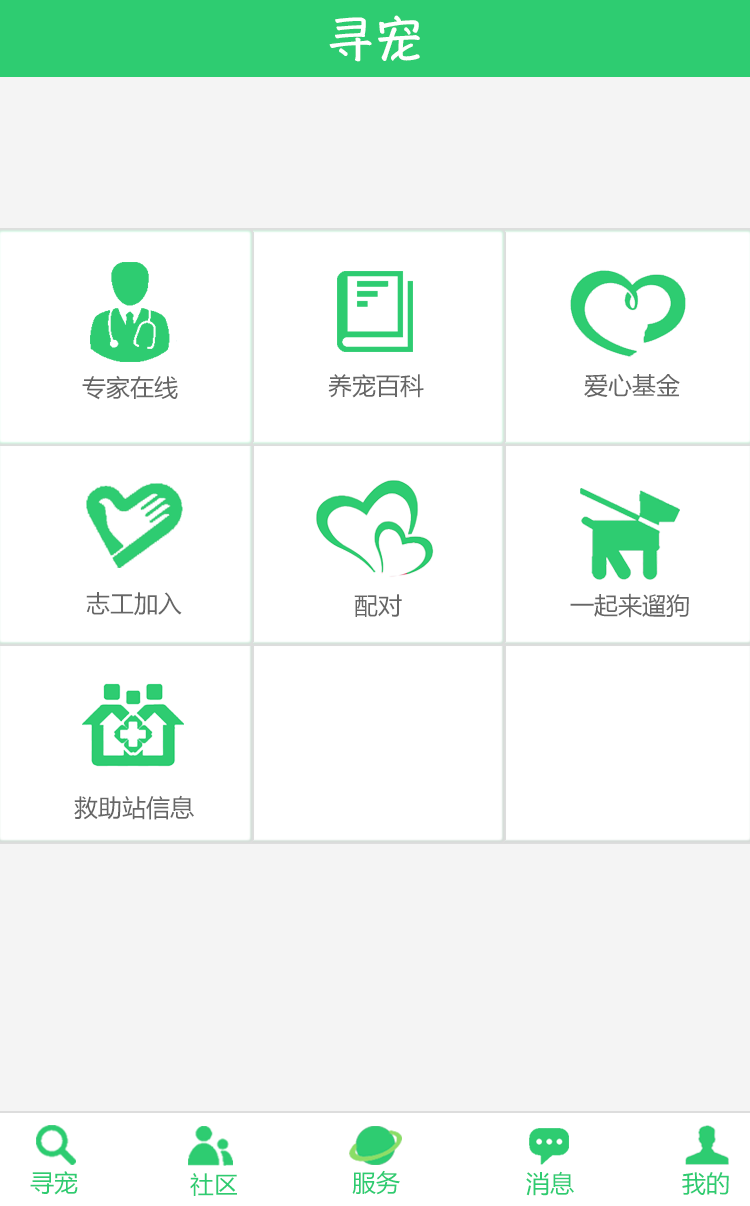
<style>
.page{position:relative;width:750px;height:1206px;background:#ffffff}
.page>*{position:absolute;margin:0}
.t1{font:48.7px "HannotateSC-W7";color:#ffffff}
.t2{font:24px "MicrosoftYaHei";color:#666666}
.t3{font:24px "MicrosoftYaHei";color:#2ecc71}
.t4{font:24px "MicrosoftYaHei"}
</style>
<div class="page">
<p class="t1" style="left:329px;top:15px;width:91px;height:47px">寻宠</p>
<p class="t2" style="left:82px;top:375px;width:96px;height:25px">专家在线</p>
<p class="t2" style="left:328px;top:374px;width:96px;height:24px">养宠百科</p>
<p class="t2" style="left:584px;top:374px;width:96px;height:24px">爱心基金</p>
<p class="t2" style="left:86px;top:592px;width:96px;height:24px">志工加入</p>
<p class="t2" style="left:570px;top:593px;width:119px;height:25px">一起来遛狗</p>
<p class="t2" style="left:354px;top:594px;width:48px;height:23px">配对</p>
<p class="t2" style="left:74px;top:795px;width:120px;height:25px">救助站信息</p>
<p class="t3" style="left:30px;top:1171px;width:48px;height:24px">寻宠</p>
<p class="t3" style="left:190px;top:1173px;width:47px;height:23px">社区</p>
<p class="t4" style="left:352px;top:1171px;width:48px;height:25px">服务</p>
<p class="t3" style="left:352px;top:1170px;width:48px;height:25px">服务</p>
<p class="t4" style="left:525px;top:1171px;width:48px;height:25px">消息</p>
<p class="t3" style="left:526px;top:1171px;width:48px;height:25px">消息</p>
<p class="t3" style="left:682px;top:1172px;width:47px;height:23px">我的</p>
<p class="t3" style="left:682px;top:1172px;width:47px;height:23px">我的</p>
</div>
